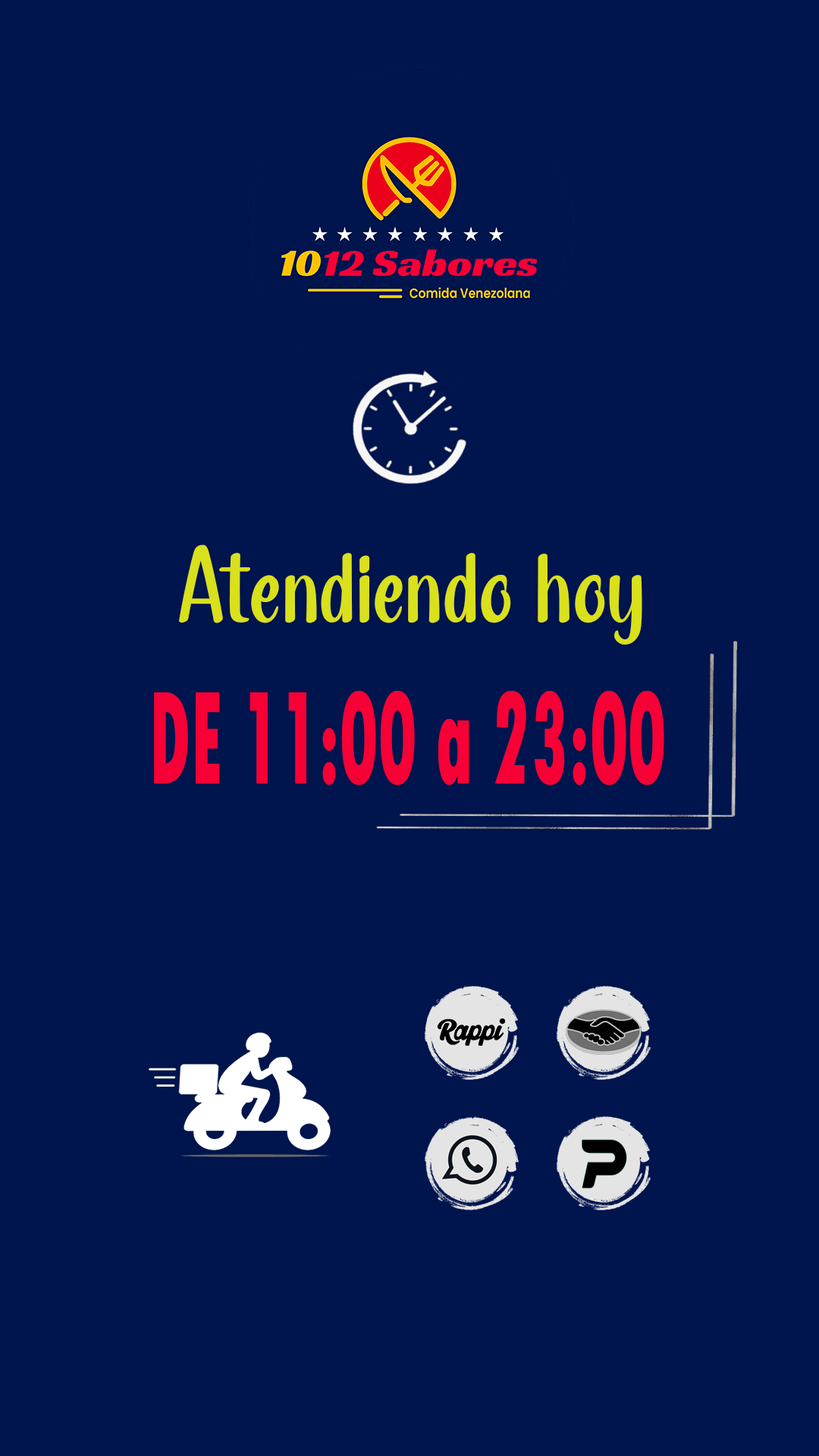
<style>
.page{position:relative;width:819px;height:1456px;background:#00144d}
.page>*{position:absolute;margin:0}
.t1{font:98.6px "BakeryRoastDemoRegular";letter-spacing:0.025em;color:#d9e01c;scale:0.89 1}
.t2{font:139.3px "TwCenMT-CondensedExtraBold";color:#f70035;scale:0.56 1}
</style>
<div class="page">
<p class="t1" style="left:179px;top:544px;width:463px;height:101px">Atendiendo hoy</p>
<p class="t2" style="left:154px;top:691px;width:510px;height:94px">DE 11:00 a 23:00</p>
</div>
